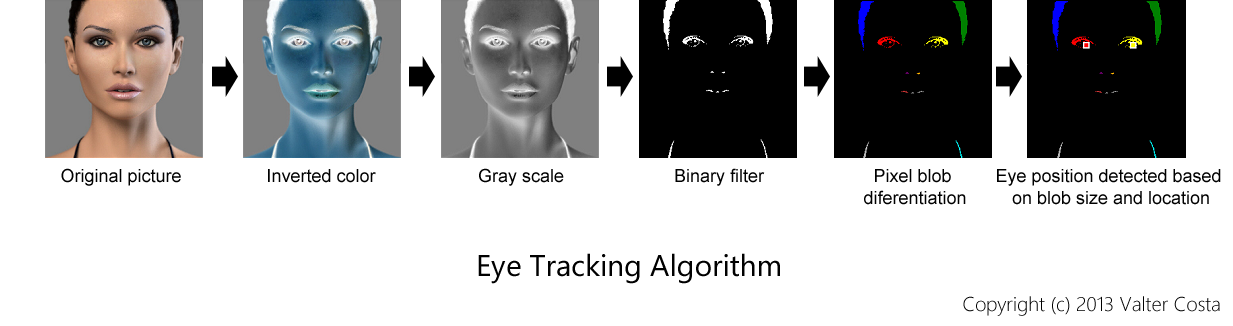
<style>
.page{position:relative;width:1233px;height:326px;background:#ffffff}
.page>*{position:absolute;margin:0}
.t1{font:18px "ArialMT";color:#000000}
.t2{font:30px "SegoeUI";color:#000000}
.t3{font:20px "SegoeUI-Light";color:#000000}
</style>
<div class="page">
<p class="t1" style="left:61px;top:168px;width:120px;height:18px">Original picture</p>
<p class="t1" style="left:268px;top:169px;width:108px;height:14px">Inverted color</p>
<p class="t1" style="left:479px;top:168px;width:85px;height:18px">Gray scale</p>
<p class="t1" style="left:675px;top:168px;width:90px;height:18px">Binary filter</p>
<p class="t1" style="left:864px;top:169px;width:102px;height:36px;text-align:center">Pixel blob <br>diferentiation</p>
<p class="t1" style="left:997px;top:169px;width:224px;height:36px;text-align:center">Eye position detected based <br>on blob size and location</p>
<p class="t2" style="left:478px;top:253px;width:302px;height:31px">Eye Tracking Algorithm</p>
<p class="t3" style="left:963px;top:296px;width:257px;height:20px">Copyright (c) 2013 Valter Costa</p>
</div>
